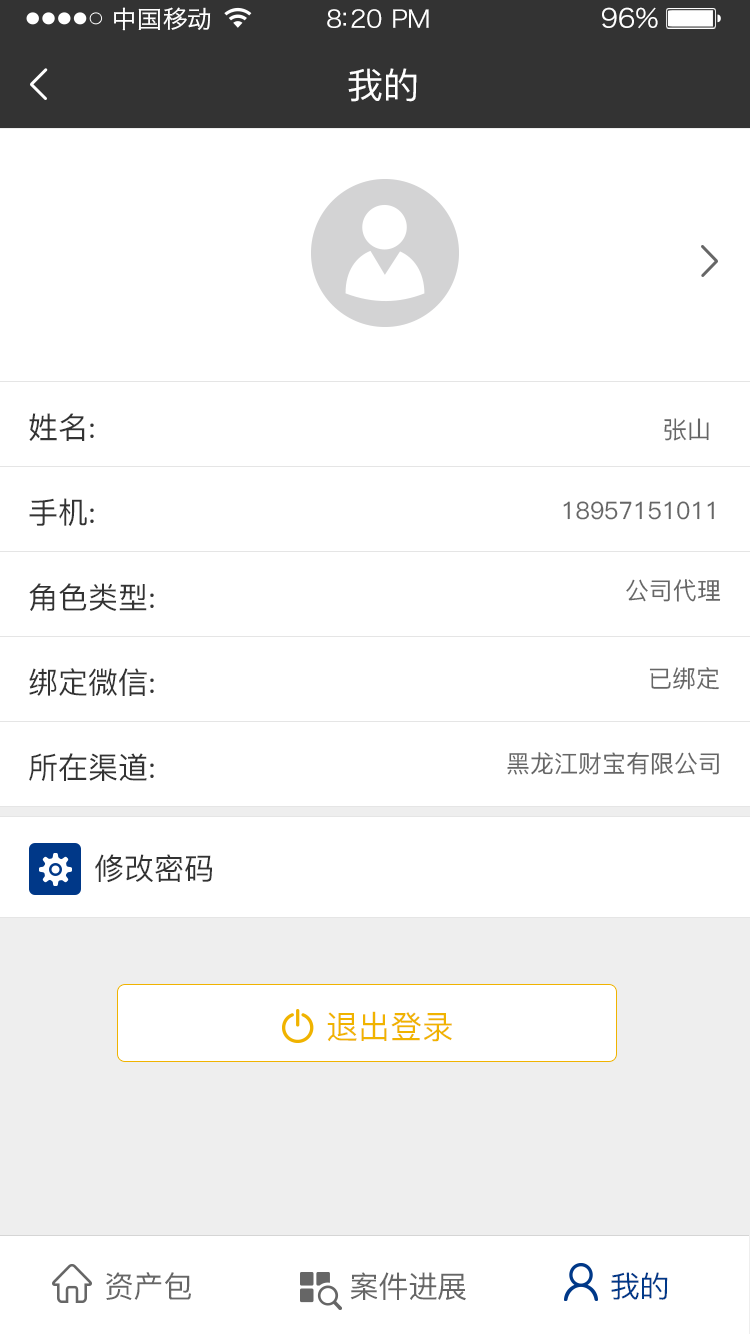
<style>
.page{position:relative;width:750px;height:1334px;background:#ffffff}
.page>*{position:absolute;margin:0}
.t1{font:24px "HiraginoSansGB-W3";letter-spacing:0.02em;color:#ffffff;scale:1.03 1}
.t2{font:24px "HiraginoSansGB-W3";letter-spacing:-0.02em;color:#ffffff;scale:1.03 1}
.t3{font:26.2px "HiraginoSansGB-W3";letter-spacing:-0.02em;color:#ffffff;scale:1.03 1}
.t4{font:36px "PingFang-SC-Medium";letter-spacing:-0.02em;color:#ffffff}
.t5{font:30px "PingFang-SC-Medium";color:#333333}
.t6{font:24px "PingFang-SC-Medium";color:#666666}
.t7{font:32px "PingFang-SC-Medium";color:#f0b300}
.t8{font:30px "PingFang-SC-Medium";letter-spacing:-0.02em;color:#666666}
.t9{font:30px "PingFang-SC-Medium";letter-spacing:-0.02em;color:#003888}
</style>
<div class="page">
<p class="t1" style="left:114px;top:7px;width:97px;height:24px">中国移动</p>
<p class="t2" style="left:327px;top:9px;width:102px;height:19px">8:20 PM</p>
<p class="t3" style="left:602px;top:7px;width:56px;height:22px">96%</p>
<p class="t4" style="left:348px;top:68px;width:69px;height:34px">我的</p>
<p class="t5" style="left:29px;top:413px;width:65px;height:28px">姓名:</p>
<p class="t6" style="left:664px;top:418px;width:45px;height:23px">张山</p>
<p class="t5" style="left:29px;top:498px;width:65px;height:28px">手机:</p>
<p class="t6" style="left:563px;top:501px;width:151px;height:19px">18957151011</p>
<p class="t6" style="left:626px;top:579px;width:95px;height:23px">公司代理</p>
<p class="t5" style="left:29px;top:583px;width:125px;height:28px">角色类型:</p>
<p class="t5" style="left:29px;top:668px;width:125px;height:28px">绑定微信:</p>
<p class="t6" style="left:649px;top:667px;width:70px;height:23px">已绑定</p>
<p class="t5" style="left:29px;top:753px;width:125px;height:28px">所在渠道:</p>
<p class="t6" style="left:507px;top:752px;width:212px;height:23px">黑龙江财宝有限公司</p>
<p class="t5" style="left:95px;top:854px;width:117px;height:29px">修改密码</p>
<p class="t7" style="left:327px;top:1011px;width:125px;height:31px">退出登录</p>
<p class="t8" style="left:106px;top:1272px;width:85px;height:28px">资产包</p>
<p class="t8" style="left:350px;top:1272px;width:116px;height:29px">案件进展</p>
<p class="t9" style="left:611px;top:1272px;width:57px;height:28px">我的</p>
</div>
